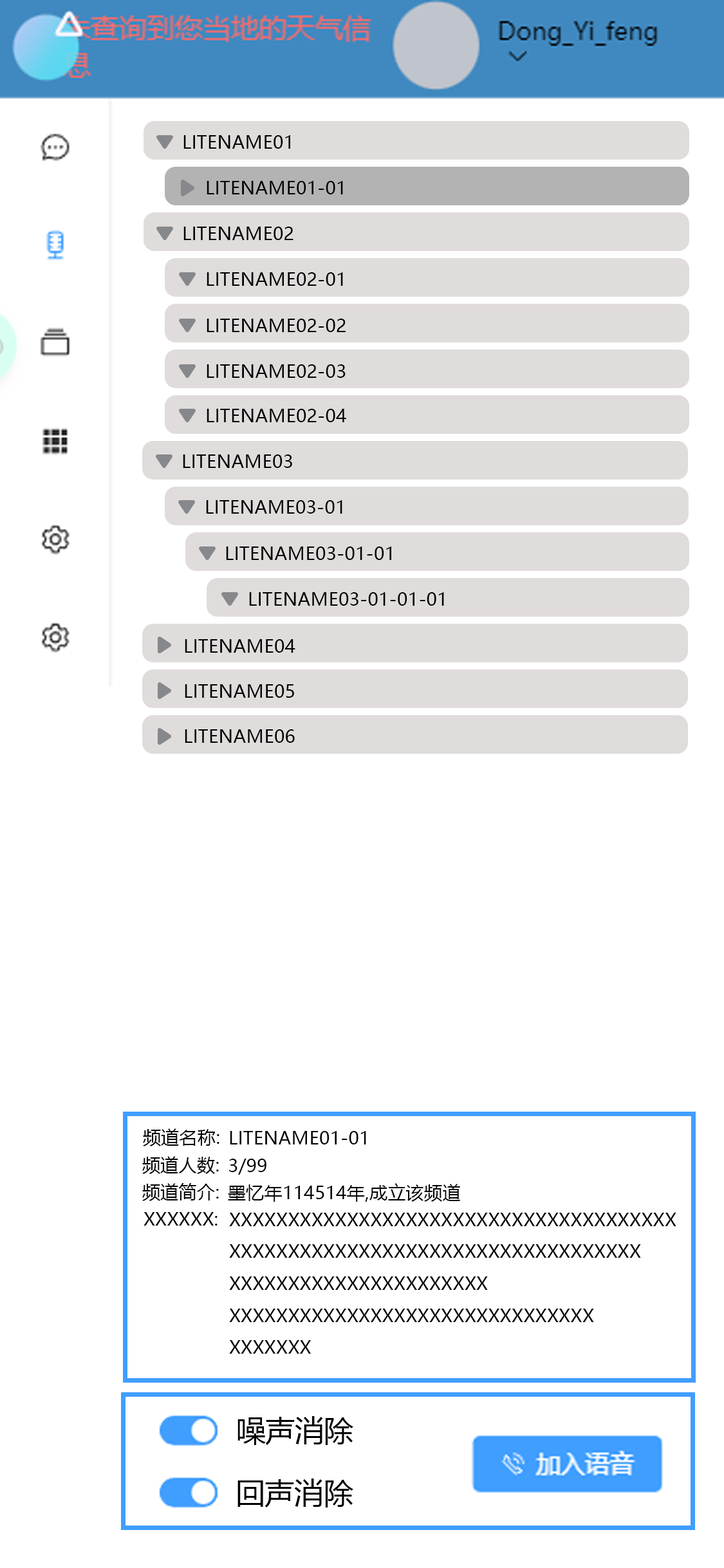
<style>
.page{position:relative;width:724px;height:1568px;background:#ffffff}
.page>*{position:absolute;margin:0}
.t1{font:18.3px "MicrosoftYaHeiUI";color:#000000;text-transform:uppercase}
.t2{font:29.3px "MicrosoftYaHeiUI";color:#000000;text-transform:uppercase}
</style>
<div class="page">
<p class="t1" style="left:183px;top:135px;width:107px;height:14px">LiteName01</p>
<p class="t1" style="left:207px;top:181px;width:136px;height:13px">LiteName01-01</p>
<p class="t1" style="left:183px;top:227px;width:111px;height:13px">LiteName02</p>
<p class="t1" style="left:207px;top:272px;width:136px;height:14px">LiteName02-01</p>
<p class="t1" style="left:207px;top:319px;width:139px;height:13px">LiteName02-02</p>
<p class="t1" style="left:207px;top:364px;width:139px;height:14px">LiteName02-03</p>
<p class="t1" style="left:207px;top:409px;width:139px;height:13px">LiteName02-04</p>
<p class="t1" style="left:183px;top:454px;width:109px;height:14px">LiteName03</p>
<p class="t1" style="left:206px;top:500px;width:136px;height:14px">LiteName03-01</p>
<p class="t1" style="left:226px;top:546px;width:165px;height:14px">LiteName03-01-01</p>
<p class="t1" style="left:249px;top:592px;width:195px;height:14px">LiteName03-01-01-01</p>
<p class="t1" style="left:185px;top:639px;width:110px;height:14px">LiteName04</p>
<p class="t1" style="left:185px;top:684px;width:109px;height:14px">LiteName05</p>
<p class="t1" style="left:185px;top:729px;width:110px;height:14px">LiteName06</p>
<p class="t1" style="left:143px;top:1128px;width:76px;height:18px">频道名称:</p>
<p class="t1" style="left:230px;top:1131px;width:136px;height:13px">LiteName01-01</p>
<p class="t1" style="left:142px;top:1156px;width:77px;height:18px">频道人数:</p>
<p class="t1" style="left:229px;top:1159px;width:37px;height:16px">3/99</p>
<p class="t1" style="left:142px;top:1183px;width:77px;height:18px">频道简介:</p>
<p class="t1" style="left:228px;top:1183px;width:233px;height:19px">墨忆年114514年,成立该频道</p>
<p class="t1" style="left:144px;top:1212px;width:74px;height:14px">XXXXXX:</p>
<p class="t1" style="left:229px;top:1213px;width:448px;height:141px">XXXXXXXXXXXXXXXXXXXXXXXXXXXXXXXXXXXXXX<br>XXXXXXXXXXXXXXXXXXXXXXXXXXXXXXXXXXX<br>XXXXXXXXXXXXXXXXXXXXXX<br>XXXXXXXXXXXXXXXXXXXXXXXXXXXXXXX<br>XXXXXXX</p>
<p class="t2" style="left:238px;top:1416px;width:115px;height:29px">噪声消除</p>
<p class="t2" style="left:238px;top:1479px;width:115px;height:28px">回声消除</p>
</div>
